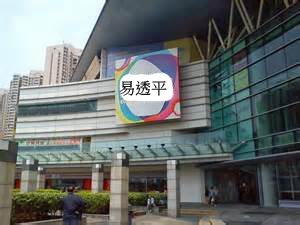
<style>
.page{position:relative;width:300px;height:225px}
.page>*{position:absolute;margin:0}
.t1{font:16px "MingLiU";color:#000000}
</style>
<div class="page">
<p class="t1" style="left:120px;top:80px;width:47px;height:16px">易透平</p>
</div>
